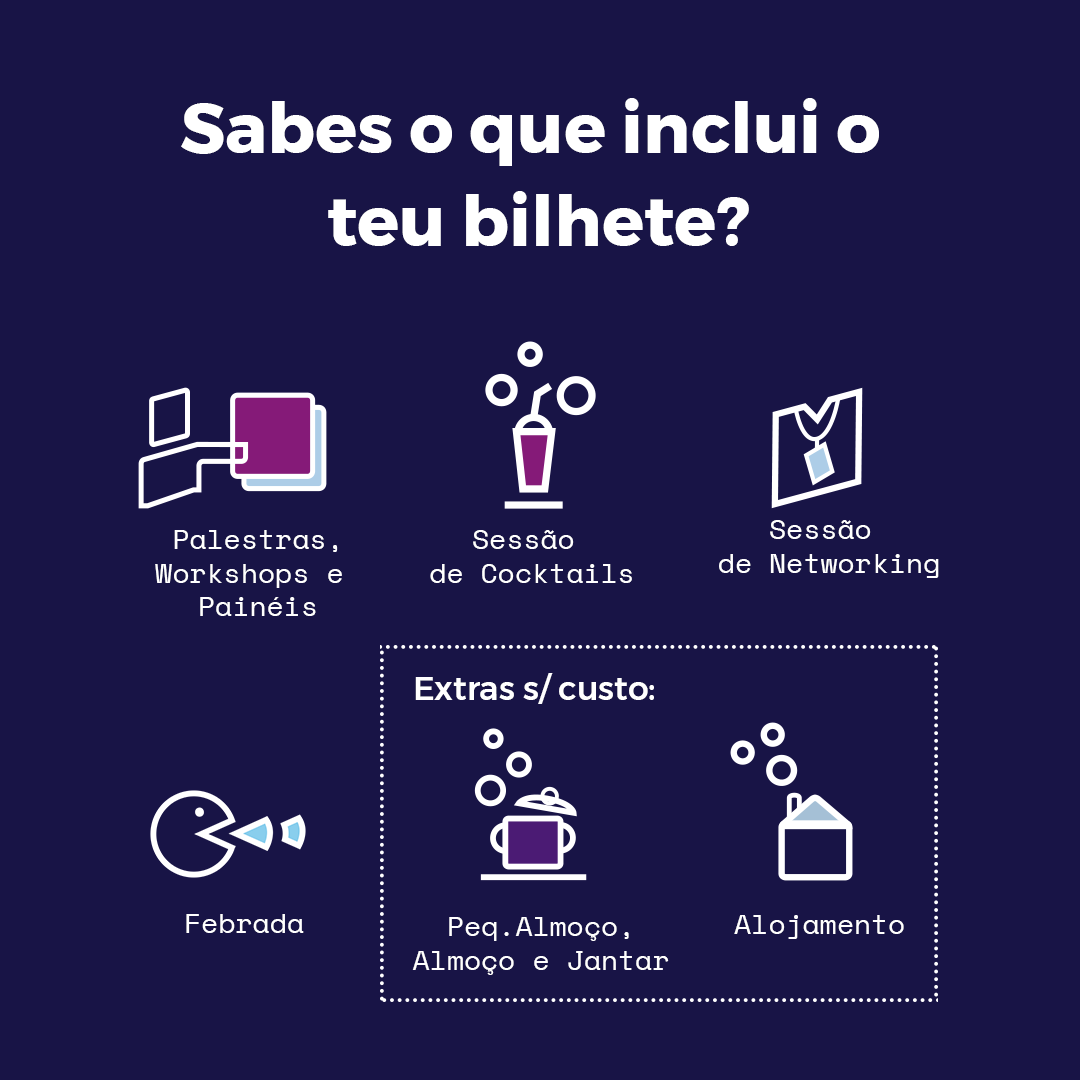
<style>
.page{position:relative;width:1080px;height:1080px;background:#181446}
.page>*{position:absolute;margin:0}
.t1{font:70px/93.3px "Montserrat-Bold";color:#ffffff}
.t2{font:28px "SpaceMono-Regular";color:#ffffff}
.t3{font:33px "Montserrat-Medium";color:#ffffff}
</style>
<div class="page">
<p class="t1" style="left:181px;top:98px;width:698px;height:148px;text-align:center">Sabes o que inclui o <br>teu bilhete?</p>
<p class="t2" style="left:719px;top:520px;width:220px;height:58px;text-align:center">Sessão <br>de Networking</p>
<p class="t2" style="left:155px;top:530px;width:187px;height:86px;text-align:center">Palestras,<br>Workshops e <br>Painéis</p>
<p class="t2" style="left:430px;top:530px;width:202px;height:53px;text-align:center">Sessão <br>de Cocktails</p>
<p class="t3" style="left:415px;top:673px;width:239px;height:31px">Extras s/ custo:</p>
<p class="t2" style="left:186px;top:914px;width:118px;height:19px">Febrada</p>
<p class="t2" style="left:412px;top:917px;width:257px;height:58px;text-align:center">Peq.Almoço,<br>Almoço e Jantar</p>
<p class="t2" style="left:734px;top:915px;width:170px;height:24px">Alojamento</p>
</div>
